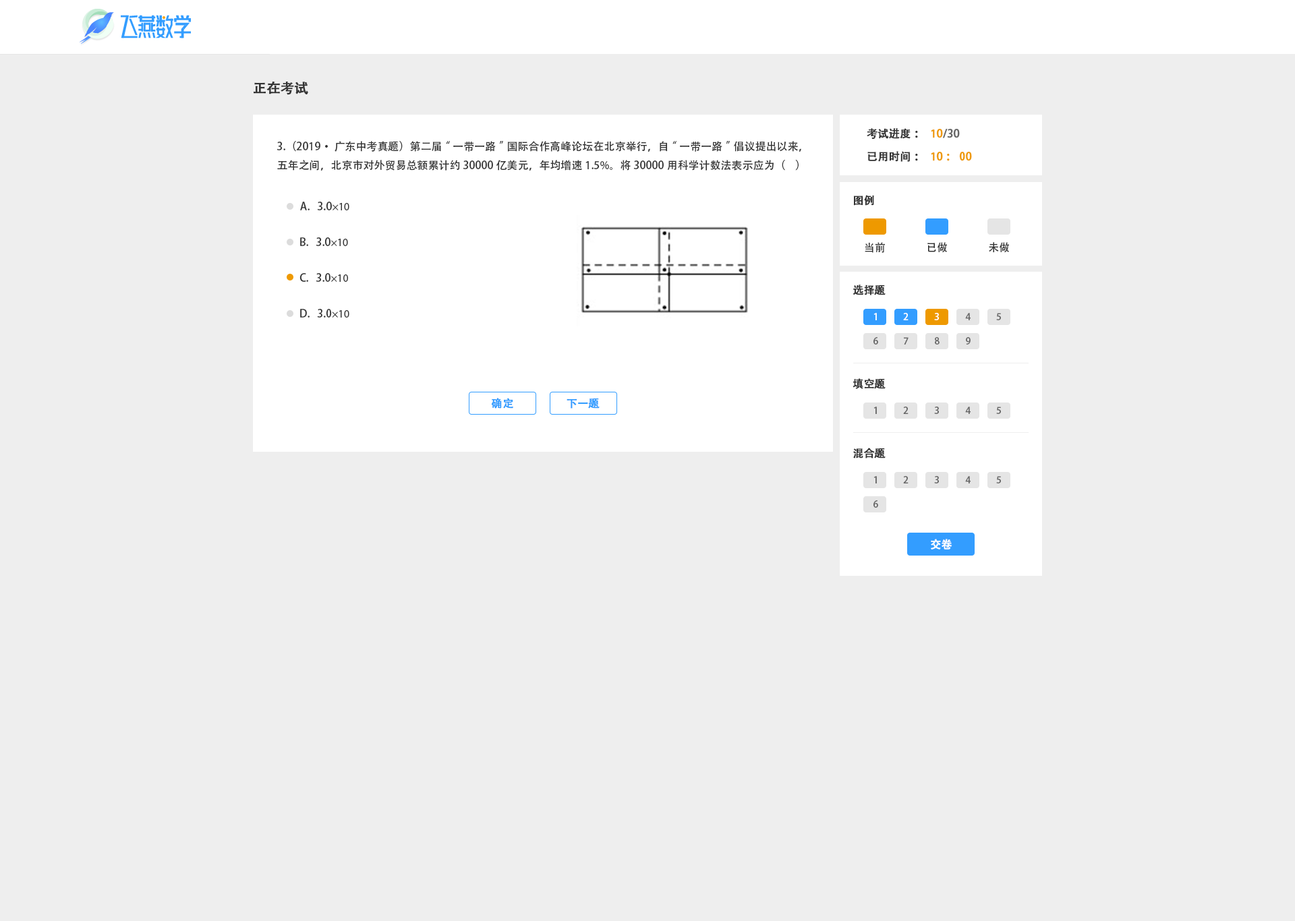
<style>
.page{position:relative;width:1295px;height:921px;background:#eeeeee}
.page>*{position:absolute;margin:0}
.t1{font:13.5px "AdobeHeitiStd-Regular";color:#333333;font-weight:bold}
.t2{font:10.8px "AdobeHeitiStd-Regular";color:#333333;font-weight:bold}
.t3{font:10.8px "AdobeHeitiStd-Regular";color:#666666;font-weight:bold}
.t4{font:10.8px "AdobeHeitiStd-Regular";color:#ee9900;font-weight:bold}
.t5{font:10.8px "AdobeHeitiStd-Regular";color:#333333}
.t6{font:10.8px "MyriadPro-Regular";color:#333333}
.t7{font:9.4px "AdobeHeitiStd-Regular";color:#ffffff}
.t8{font:9.4px "AdobeHeitiStd-Regular";color:#666666}
.t9{font:10.8px "AdobeHeitiStd-Regular";color:#339dff;font-weight:bold}
.t10{font:10.8px "AdobeHeitiStd-Regular";color:#ffffff;font-weight:bold}
</style>
<div class="page">
<p class="t1" style="left:254px;top:81px;width:54px;height:14px">正在考试</p>
<p class="t2" style="left:866px;top:128px;width:52px;height:12px">考试进度：</p>
<p class="t3" style="left:931px;top:129px;width:29px;height:9px"><span class="t4">１0</span>/30</p>
<p class="t5" style="left:276px;top:141px;width:525px;height:30px">3.（2019·广东中考真题）第二届“一带一路”国际合作高峰论坛在北京举行，自“一带一路”倡议提出以来，五年之间，北京市对外贸易总额累计约30000亿美元，年均增速1.5%。将30000用科学计数法表示应为（    ）</p>
<p class="t2" style="left:867px;top:151px;width:51px;height:11px">已用时间：</p>
<p class="t4" style="left:931px;top:152px;width:41px;height:9px">１0：00</p>
<p class="t2" style="left:853px;top:195px;width:21px;height:11px">图例</p>
<p class="t5" style="left:300px;top:202px;width:49px;height:8px">A.   3.0<span class="t6">×10</span></p>
<p class="t5" style="left:300px;top:237px;width:48px;height:9px">B.   3.0<span class="t6">×10</span></p>
<p class="t5" style="left:864px;top:242px;width:21px;height:11px">当前</p>
<p class="t5" style="left:927px;top:242px;width:20px;height:11px">已做</p>
<p class="t5" style="left:988px;top:242px;width:21px;height:11px">未做</p>
<p class="t5" style="left:299px;top:273px;width:49px;height:9px">C.   3.0<span class="t6">×10</span></p>
<p class="t2" style="left:853px;top:285px;width:32px;height:10px">选择题</p>
<p class="t5" style="left:300px;top:309px;width:49px;height:9px">D.   3.0<span class="t6">×10</span></p>
<p class="t7" style="left:873px;top:313px;width:4px;height:7px">1</p>
<p class="t7" style="left:903px;top:313px;width:5px;height:7px">2</p>
<p class="t7" style="left:934px;top:313px;width:5px;height:7px">3</p>
<p class="t8" style="left:965px;top:313px;width:5px;height:7px">4</p>
<p class="t8" style="left:996px;top:313px;width:5px;height:7px">5</p>
<p class="t8" style="left:873px;top:337px;width:5px;height:8px">6</p>
<p class="t8" style="left:904px;top:337px;width:4px;height:8px">7</p>
<p class="t8" style="left:935px;top:337px;width:4px;height:8px">8</p>
<p class="t8" style="left:966px;top:337px;width:4px;height:8px">9</p>
<p class="t2" style="left:852px;top:378px;width:33px;height:11px">填空题</p>
<p class="t9" style="left:491px;top:398px;width:22px;height:11px">确定</p>
<p class="t9" style="left:566px;top:398px;width:33px;height:11px">下一题</p>
<p class="t8" style="left:873px;top:407px;width:4px;height:7px">1</p>
<p class="t8" style="left:903px;top:407px;width:5px;height:7px">2</p>
<p class="t8" style="left:934px;top:407px;width:5px;height:7px">3</p>
<p class="t8" style="left:965px;top:407px;width:5px;height:7px">4</p>
<p class="t8" style="left:996px;top:407px;width:5px;height:7px">5</p>
<p class="t2" style="left:853px;top:448px;width:32px;height:11px">混合题</p>
<p class="t8" style="left:873px;top:476px;width:4px;height:7px">1</p>
<p class="t8" style="left:903px;top:476px;width:5px;height:7px">2</p>
<p class="t8" style="left:934px;top:476px;width:5px;height:7px">3</p>
<p class="t8" style="left:965px;top:476px;width:5px;height:7px">4</p>
<p class="t8" style="left:996px;top:476px;width:5px;height:7px">5</p>
<p class="t8" style="left:873px;top:500px;width:5px;height:8px">6</p>
<p class="t10" style="left:931px;top:539px;width:21px;height:11px">交卷</p>
</div>
